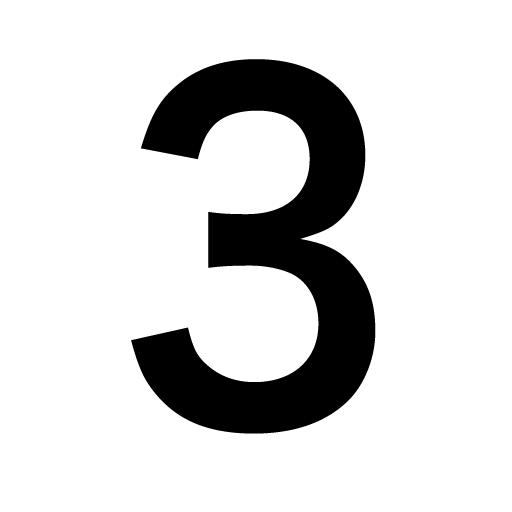
<style>
.page{position:relative;width:512px;height:512px;background:#ffffff}
.page>*{position:absolute;margin:0}
.t1{font:450px "HiraKakuPro-W6";color:#000000;scale:0.88 1}
</style>
<div class="page">
<p class="t1" style="left:131px;top:59px;width:245px;height:375px">3</p>
</div>
